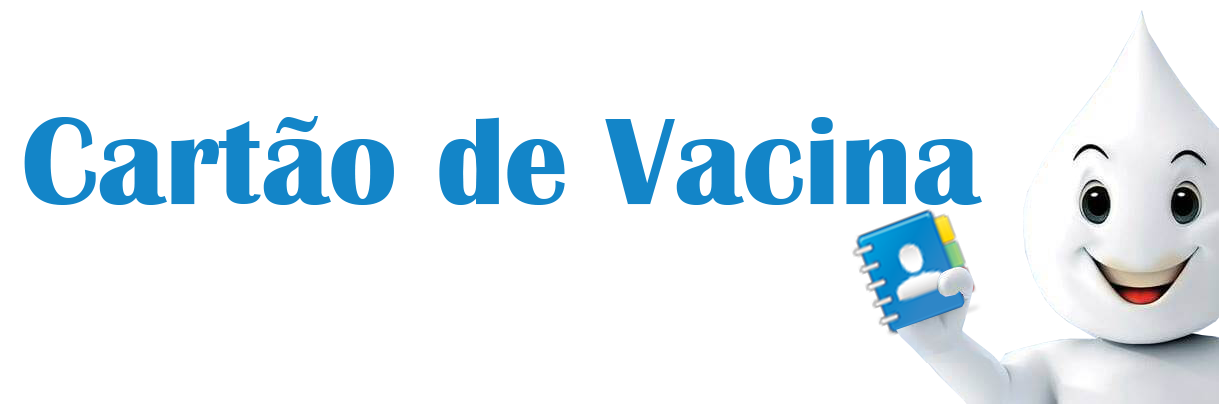
<style>
.page{position:relative;width:1219px;height:404px;background:#ffffff}
.page>*{position:absolute;margin:0}
.t1{font:127.7px "BritannicBold";color:#1385c8}
</style>
<div class="page">
<p class="t1" style="left:24px;top:116px;width:958px;height:89px">Cartão de Vacina</p>
</div>
